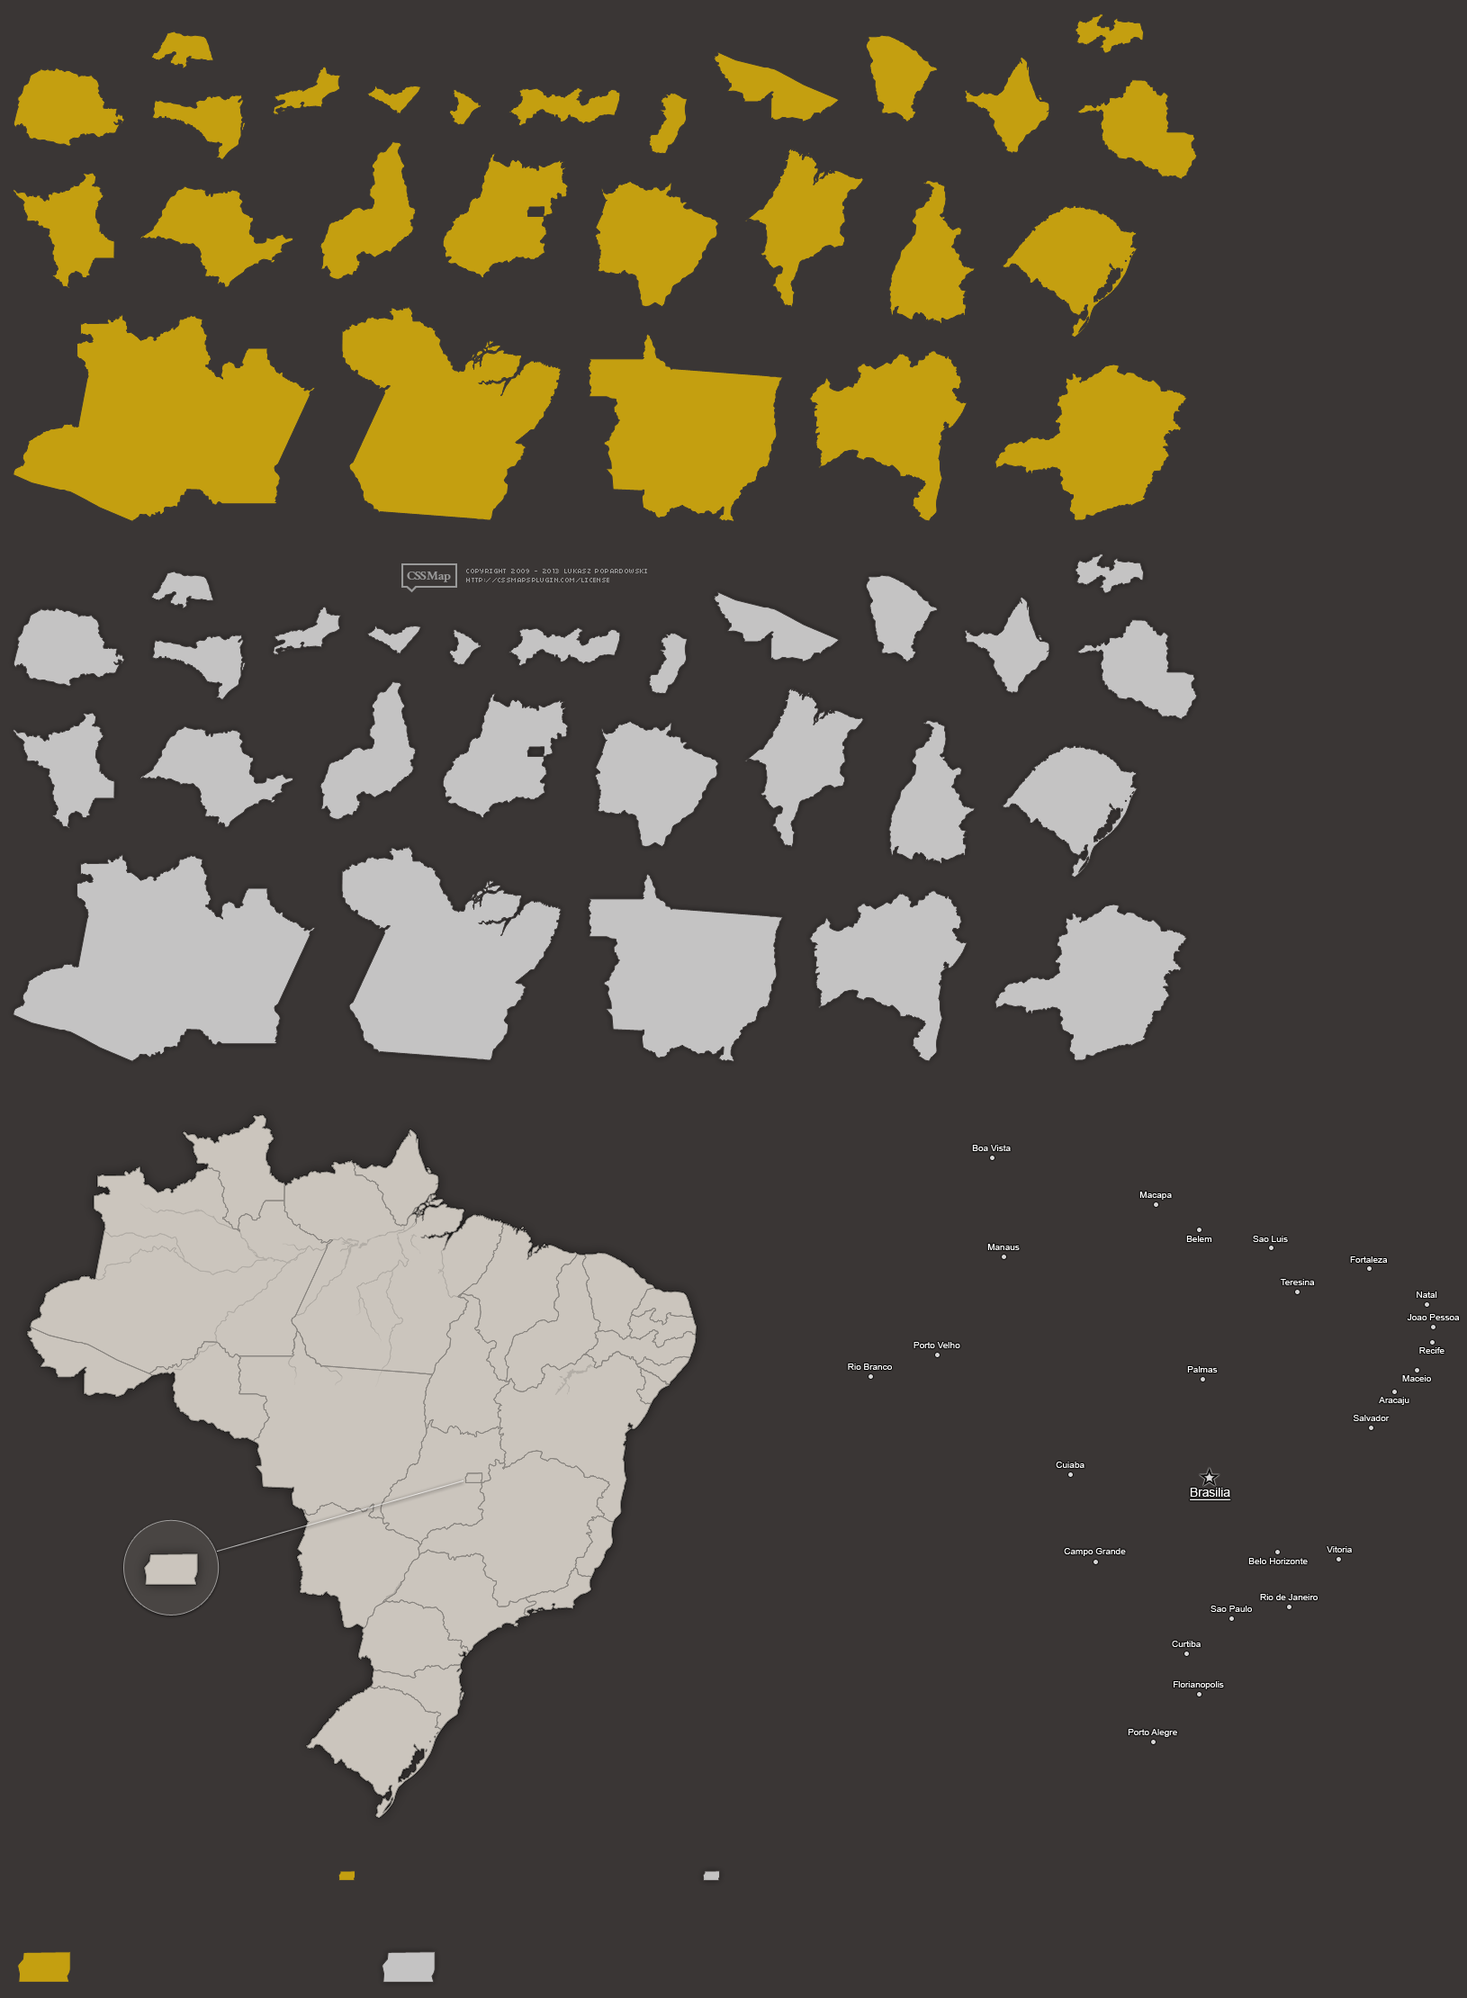
<style>
.page{position:relative;width:1467px;height:1998px;background:#3a3635}
.page>*{position:absolute;margin:0}
.t1{font:9px "ArialMT";color:#ffffff}
.t2{font:12.9px "ArialMT";color:#ffffff;text-decoration:underline;scale:0.95 1}
</style>
<div class="page">
<p class="t1" style="left:972px;top:1145px;width:39px;height:6px">Boa Vista</p>
<p class="t1" style="left:1139px;top:1192px;width:33px;height:8px">Macapa</p>
<p class="t1" style="left:1186px;top:1236px;width:26px;height:6px">Belem</p>
<p class="t1" style="left:1253px;top:1236px;width:35px;height:6px">Sao Luis</p>
<p class="t1" style="left:987px;top:1244px;width:33px;height:6px">Manaus</p>
<p class="t1" style="left:1350px;top:1256px;width:38px;height:7px">Fortaleza</p>
<p class="t1" style="left:1280px;top:1279px;width:35px;height:6px">Teresina</p>
<p class="t1" style="left:1417px;top:1292px;width:20px;height:6px">Natal</p>
<p class="t1" style="left:1407px;top:1314px;width:53px;height:6px">Joao Pessoa</p>
<p class="t1" style="left:914px;top:1342px;width:46px;height:6px">Porto Velho</p>
<p class="t1" style="left:1419px;top:1347px;width:26px;height:7px">Recife</p>
<p class="t1" style="left:848px;top:1364px;width:44px;height:6px">Rio Branco</p>
<p class="t1" style="left:1187px;top:1366px;width:31px;height:7px">Palmas</p>
<p class="t1" style="left:1402px;top:1375px;width:29px;height:7px">Maceio</p>
<p class="t1" style="left:1379px;top:1397px;width:30px;height:8px">Aracaju</p>
<p class="t1" style="left:1353px;top:1415px;width:37px;height:6px">Salvador</p>
<p class="t1" style="left:1056px;top:1462px;width:29px;height:6px">Cuiaba</p>
<p class="t2" style="left:1190px;top:1488px;width:41px;height:12px">Brasilia</p>
<p class="t1" style="left:1064px;top:1548px;width:62px;height:8px">Campo Grande</p>
<p class="t1" style="left:1327px;top:1546px;width:25px;height:7px">Vitoria</p>
<p class="t1" style="left:1248px;top:1558px;width:60px;height:6px">Belo Horizonte</p>
<p class="t1" style="left:1260px;top:1594px;width:58px;height:6px">Rio de Janeiro</p>
<p class="t1" style="left:1211px;top:1606px;width:41px;height:6px">Sao Paulo</p>
<p class="t1" style="left:1172px;top:1641px;width:29px;height:6px">Curtiba</p>
<p class="t1" style="left:1174px;top:1681px;width:50px;height:8px">Florianopolis</p>
<p class="t1" style="left:1128px;top:1729px;width:49px;height:8px">Porto Alegre</p>
</div>
